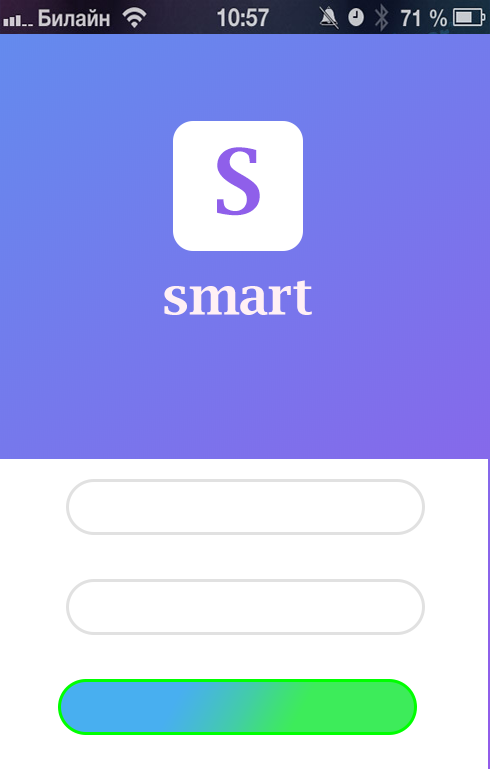
<style>
.page{position:relative;width:490px;height:769px;background:#ffffff}
.page>*{position:absolute;margin:0}
.t1{font:90px "LucidaBright-Demi";color:#8f5fea}
.t2{font:52px "LucidaBright-Demi";color:#fff0f5}
</style>
<div class="page">
<p class="t1" style="left:217px;top:147px;width:43px;height:69px">S</p>
<p class="t2" style="left:164px;top:280px;width:148px;height:35px">smart</p>
</div>
